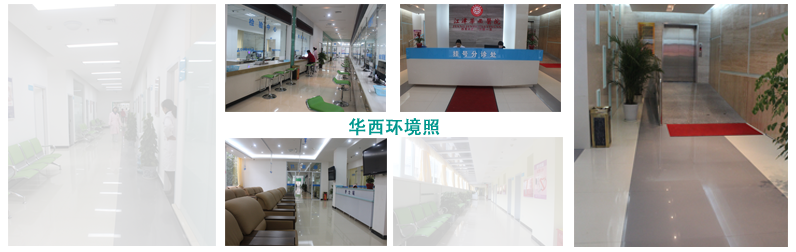
<style>
.page{position:relative;width:796px;height:252px}
.page>*{position:absolute;margin:0}
.t1{font:18px "AdobeHeitiStd-Regular";color:#01978e;font-weight:bold}
</style>
<div class="page">
<p class="t1" style="left:349px;top:118px;width:91px;height:18px">华西环境照</p>
</div>
